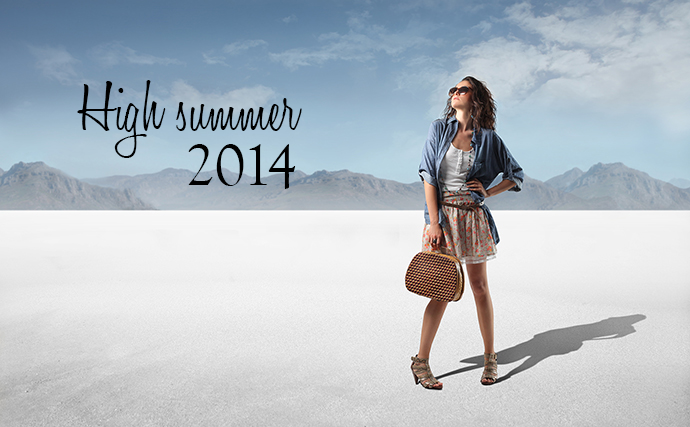
<style>
.page{position:relative;width:690px;height:427px}
.page>*{position:absolute;margin:0}
.t1{font:72px "HoneyScript-Light";color:#000000}
.t2{font:60px "GoudyOldStyleT-Regular";color:#000000}
</style>
<div class="page">
<p class="t1" style="left:77px;top:80px;width:225px;height:78px">High summer</p>
<p class="t2" style="left:188px;top:144px;width:108px;height:45px">2014</p>
</div>
